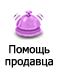
<style>
.page{position:relative;width:58px;height:71px;background:#ffffff}
.page>*{position:absolute;margin:0}
.t1{font:11px/12px "Tahoma";letter-spacing:0.01em;color:#000000}
</style>
<div class="page">
<p class="t1" style="left:5px;top:45px;width:48px;height:23px;text-align:center">Помощь<br>продавца</p>
</div>
